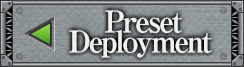
<style>
.page{position:relative;width:244px;height:67px}
.page>*{position:absolute;margin:0}
.t1{font:30px/20px "RyuminPro-ExBold";letter-spacing:-0.08em;color:#f2f0ed}
</style>
<div class="page">
<p class="t1" style="left:69px;top:10px;width:143px;height:48px;text-align:center">Preset<br>Deployment</p>
</div>
